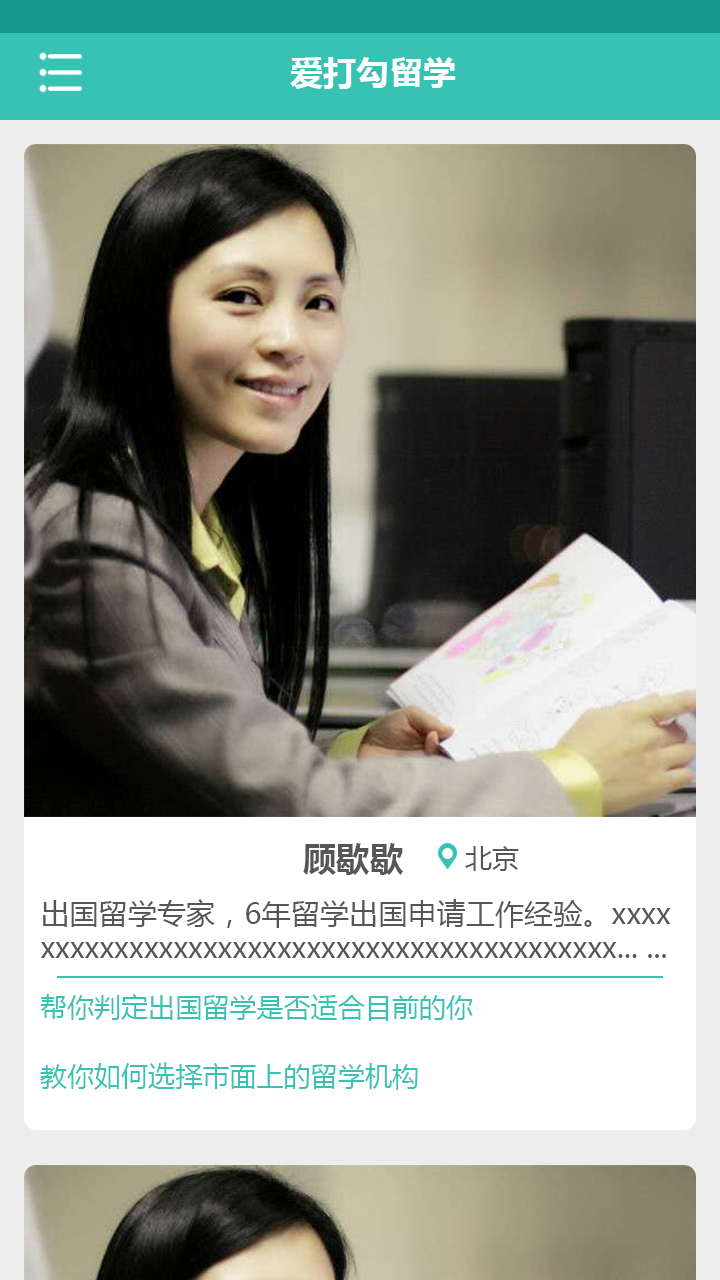
<style>
.page{position:relative;width:720px;height:1280px}
.page>*{position:absolute;margin:0}
.t1{font:33.3px "MicrosoftYaHei-Bold";color:#fefefe}
.t2{font:33.3px "MicrosoftYaHei-Bold";color:#565656}
.t3{font:27.1px "MicrosoftYaHei";color:#565656}
.t4{font:29.2px/33.3px "MicrosoftYaHei";color:#565656}
.t5{font:27.1px "MicrosoftYaHei";color:#38c2b3}
</style>
<div class="page">
<p class="t1" style="left:290px;top:57px;width:166px;height:32px">爱打勾留学</p>
<p class="t2" style="left:303px;top:843px;width:100px;height:32px">顾歇歇</p>
<p class="t3" style="left:465px;top:846px;width:54px;height:25px">北京</p>
<p class="t4" style="left:41px;top:899px;width:630px;height:59px">出国留学专家，6年留学出国申请工作经验。xxxx<br>xxxxxxxxxxxxxxxxxxxxxxxxxxxxxxxxxxxxxxx... ...</p>
<p class="t5" style="left:40px;top:994px;width:433px;height:27px">帮你判定出国留学是否适合目前的你</p>
<p class="t5" style="left:40px;top:1062px;width:378px;height:28px">教你如何选择市面上的留学机构</p>
</div>
